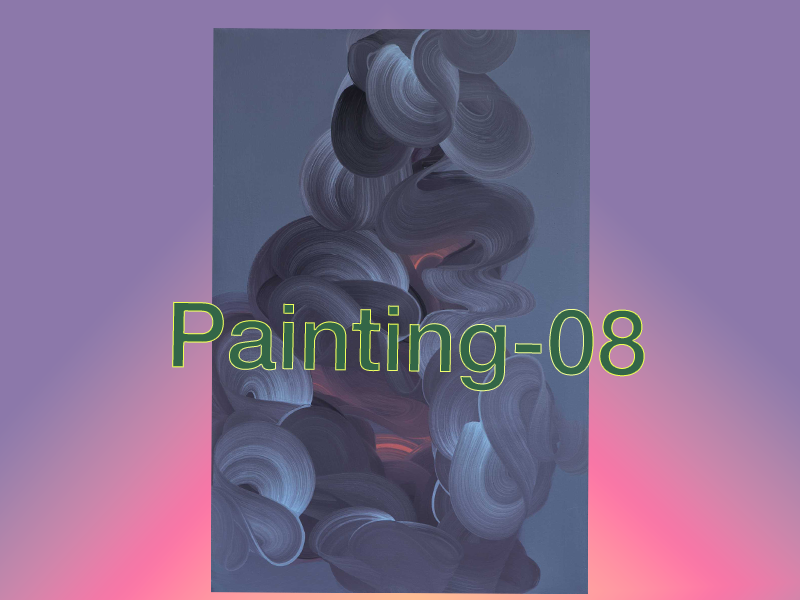
<style>
.page{position:relative;width:800px;height:600px;background:#8c78aa}
.page>*{position:absolute;margin:0}
.t1{font:38.7px "HelveticaNeue-Medium";color:#336647}
</style>
<div class="page">
<p class="t1" style="left:172px;top:301px;width:473px;height:91px;rotate:1deg">Painting-08</p>
</div>
